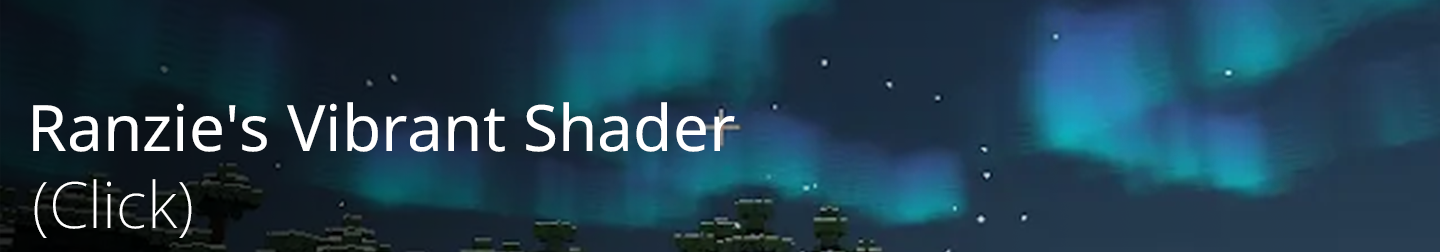
<style>
.page{position:relative;width:1440px;height:252px}
.page>*{position:absolute;margin:0}
.t1{font:64px "NotoSans-Regular";color:#ffffff}
.t2{font:64px "NotoSans-ExtraLight";color:#ffffff}
</style>
<div class="page">
<p class="t1" style="left:33px;top:102px;width:702px;height:50px">Ranzie's Vibrant Shader</p>
<p class="t2" style="left:34px;top:179px;width:158px;height:59px">(Click)</p>
</div>
